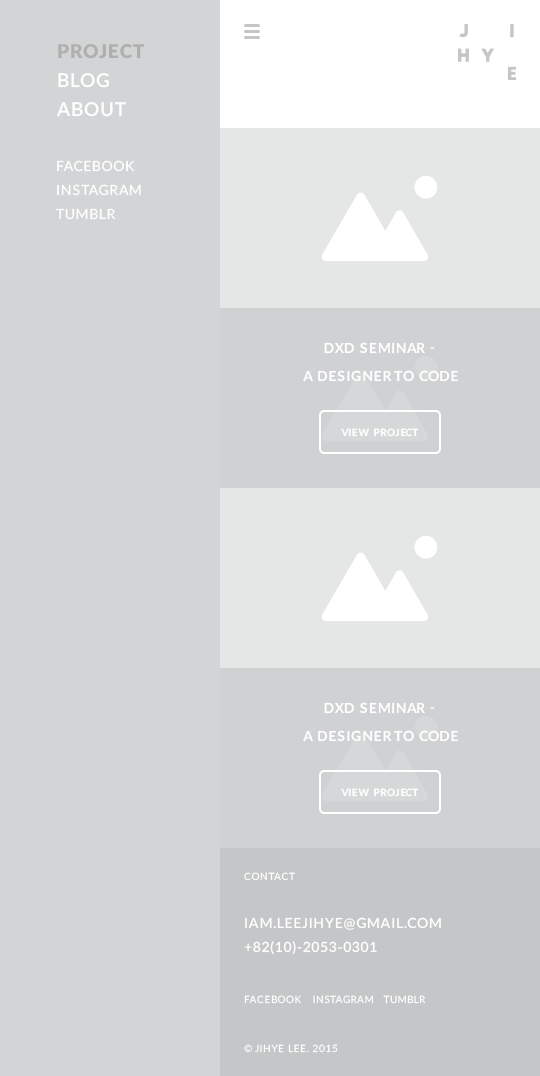
<style>
.page{position:relative;width:540px;height:1076px;background:#d2d4d5}
.page>*{position:absolute;margin:0}
.t1{font:14px/24px "Lato-Regular";letter-spacing:0.05em;color:#ffffff}
.t2{font:14px/28px "Lato-Bold";letter-spacing:0.025em;color:#ffffff;text-transform:uppercase}
.t3{font:10px "Lato-Bold";letter-spacing:0.025em;color:#ffffff;text-transform:uppercase}
.t4{font:14px/24px "Lato-Semibold";letter-spacing:0.05em;color:#ffffff}
.t5{font:10px/24px "Lato-Regular";letter-spacing:0.05em;color:#ffffff}
.t6{font:10px "Lato-Regular";letter-spacing:0.05em;color:#ffffff}
</style>
<div class="page">
<p class="t1" style="left:56px;top:160px;width:85px;height:60px">FACEBOOK<br>INSTAGRAM<br>TUMBLR</p>
<p class="t2" style="left:303px;top:342px;width:155px;height:40px;text-align:center">dxd seminar - <br>A Designer to Code</p>
<p class="t3" style="left:341px;top:428px;width:78px;height:9px">View Project</p>
<p class="t2" style="left:303px;top:702px;width:155px;height:40px;text-align:center">dxd seminar - <br>A Designer to Code</p>
<p class="t3" style="left:341px;top:788px;width:78px;height:9px">View Project</p>
<p class="t4" style="left:244px;top:872px;width:197px;height:82px"><span class="t5">CONTACT<br><br></span>IAM.LEEJIHYE@GMAIL.COM<br>+82(10)-2053-0301</p>
<p class="t6" style="left:244px;top:995px;width:182px;height:9px">FACEBOOK   INSTAGRAM   TUMBLR</p>
<p class="t6" style="left:244px;top:1044px;width:94px;height:9px">© JIHYE LEE. 2015</p>
</div>
